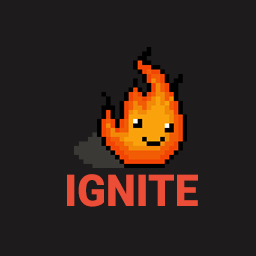
<style>
.page{position:relative;width:256px;height:256px;background:#1d1b1b}
.page>*{position:absolute;margin:0}
.t1{font:43.9px "Roboto-Black";color:#ec4d37;scale:0.97 1}
</style>
<div class="page">
<p class="t1" style="left:67px;top:174px;width:131px;height:33px">IGNITE</p>
</div>
